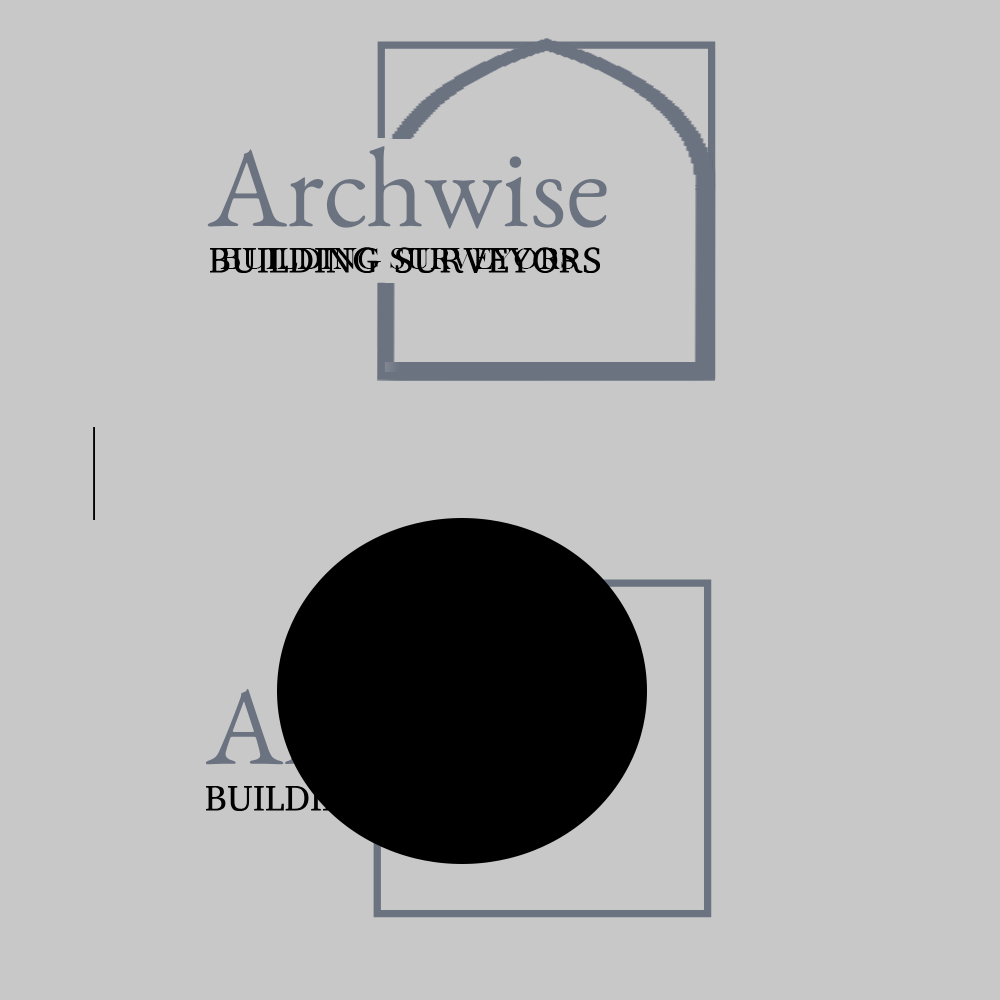
<style>
.page{position:relative;width:1000px;height:1000px;background:#c8c8c8}
.page>*{position:absolute;margin:0}
.t1{font:113.3px "Benne-Regular";color:#6b7280}
.t2{font:32px "BaskOldFace";color:#000000}
</style>
<div class="page">
<p class="t1" style="left:207px;top:146px;width:400px;height:83px">Archwise</p>
<p class="t2" style="left:220px;top:248px;width:356px;height:21px">BUILDING SURVEYORS</p>
</div>
